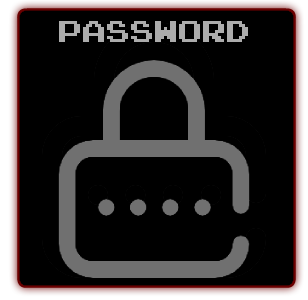
<style>
.page{position:relative;width:308px;height:300px;background:#000000}
.page>*{position:absolute;margin:0}
.t1{font:24px "Super-Mario-Bros.-NES";color:#acacac}
</style>
<div class="page">
<p class="t1" style="left:59px;top:21px;width:189px;height:21px">PASSWORD</p>
</div>
